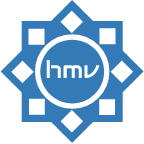
<style>
.page{position:relative;width:144px;height:144px;background:#ffffff}
.page>*{position:absolute;margin:0}
.t1{font:23.9px "Audiowide-Regular";color:#ffffff}
</style>
<div class="page">
<p class="t1" style="left:46px;top:59px;width:54px;height:19px">hmv</p>
</div>
